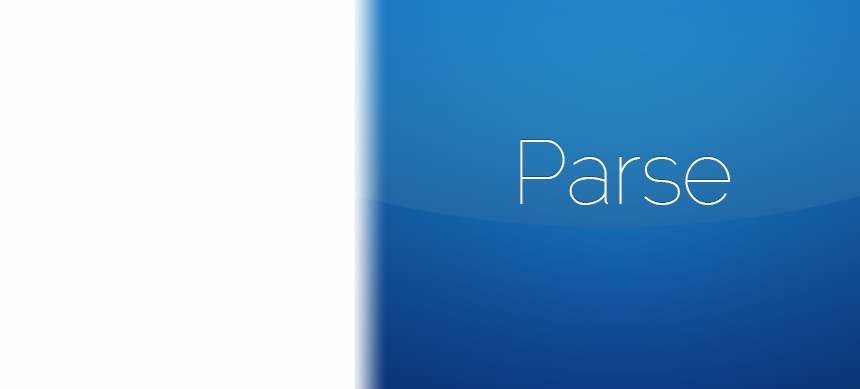
<style>
.page{position:relative;width:860px;height:389px;background:#fefefe}
.page>*{position:absolute;margin:0}
.t1{font:90px "Raleway-Thin";color:#ffffff}
</style>
<div class="page">
<p class="t1" style="left:520px;top:140px;width:211px;height:65px">Parse</p>
</div>
